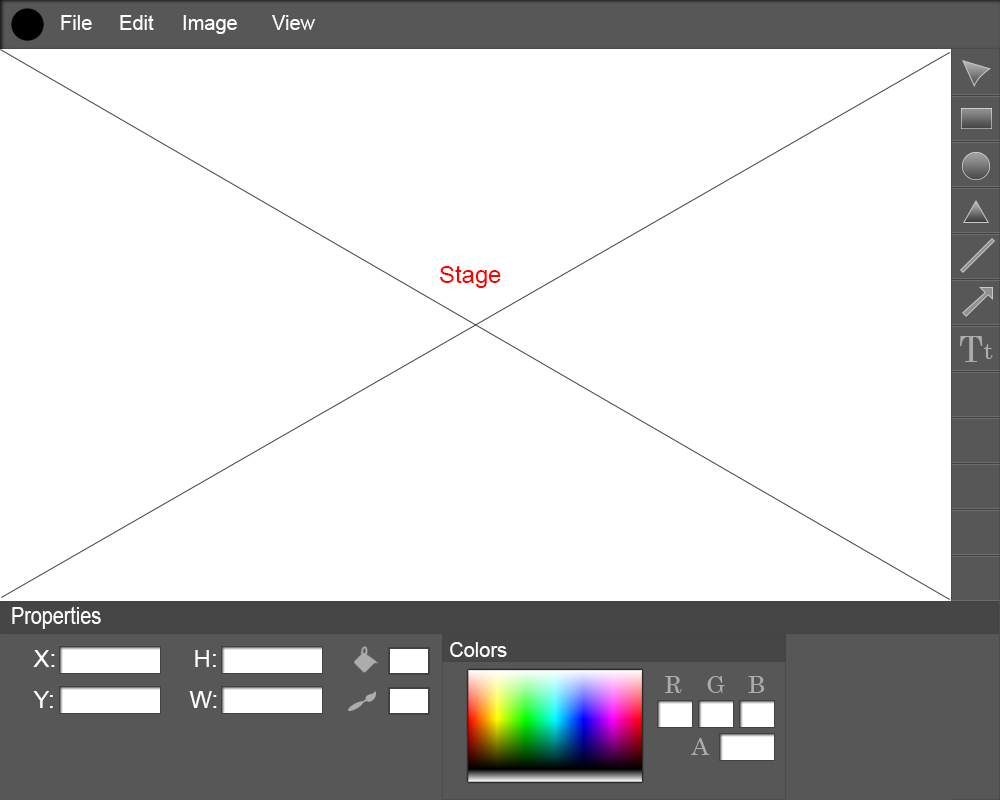
<style>
.page{position:relative;width:1000px;height:800px;background:#ffffff}
.page>*{position:absolute;margin:0}
.t1{font:20px "ArialMT";color:#ffffff}
.t2{font:24px "ArialMT";color:#fe0000}
.t3{font:36px "Century";color:#acacac}
.t4{font:24px "Century";color:#acacac}
.t5{font:24px "ArialMT";color:#fcfcfc;scale:0.82 1}
.t6{font:24px "ArialMT";color:#ffffff}
</style>
<div class="page">
<p class="t1" style="left:61px;top:15px;width:31px;height:15px">File</p>
<p class="t1" style="left:120px;top:15px;width:34px;height:15px">Edit</p>
<p class="t1" style="left:183px;top:15px;width:54px;height:19px">Image</p>
<p class="t1" style="left:272px;top:15px;width:43px;height:15px">View</p>
<p class="t2" style="left:440px;top:265px;width:61px;height:23px">Stage</p>
<p class="t3" style="left:960px;top:336px;width:23px;height:26px">T</p>
<p class="t4" style="left:984px;top:344px;width:9px;height:15px">t</p>
<p class="t5" style="left:12px;top:606px;width:89px;height:23px">Properties</p>
<p class="t6" style="left:33px;top:650px;width:22px;height:17px">X:</p>
<p class="t6" style="left:195px;top:650px;width:21px;height:17px">H:</p>
<p class="t1" style="left:450px;top:642px;width:57px;height:15px">Colors</p>
<p class="t4" style="left:665px;top:676px;width:17px;height:17px">R</p>
<p class="t4" style="left:707px;top:676px;width:18px;height:17px">G</p>
<p class="t4" style="left:748px;top:676px;width:17px;height:17px">B</p>
<p class="t6" style="left:33px;top:691px;width:20px;height:17px">Y:</p>
<p class="t6" style="left:189px;top:691px;width:28px;height:17px">W:</p>
<p class="t4" style="left:691px;top:738px;width:19px;height:17px">A</p>
</div>
